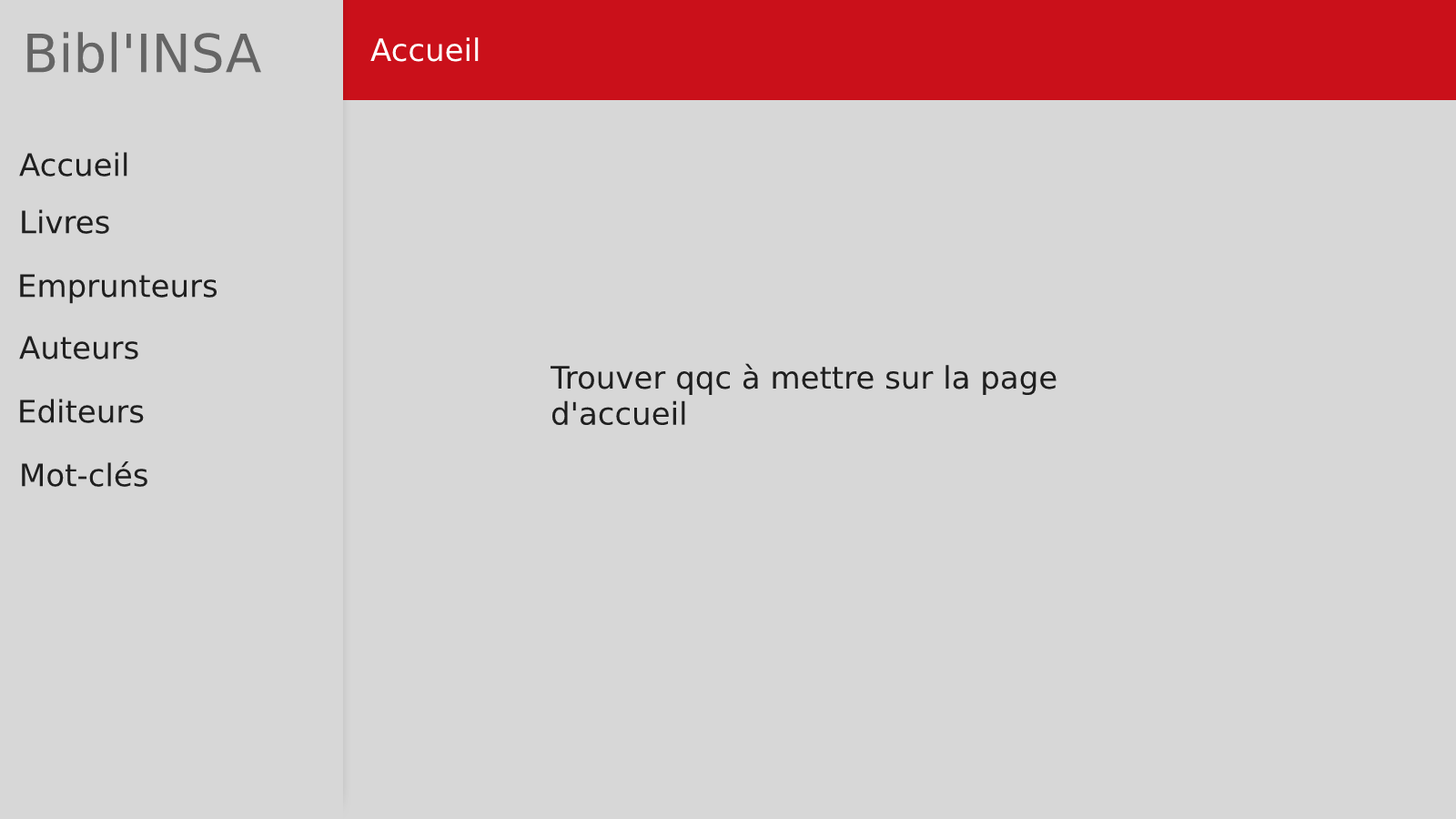
<style>
.page{position:relative;width:1456px;height:819px;background:#d7d7d7}
.page>*{position:absolute;margin:0}
.t1{font:52.8px "DejaVuSans";color:#656565}
.t2{font:30.9px "DejaVuSans";color:#ffffff}
.t3{font:30.9px "DejaVuSans";color:#1f1f1f}
</style>
<div class="page">
<p class="t1" style="left:27px;top:32px;width:234px;height:42px">Bibl'INSA</p>
<p class="t2" style="left:370px;top:37px;width:109px;height:25px">Accueil</p>
<p class="t3" style="left:19px;top:152px;width:108px;height:25px">Accueil</p>
<p class="t3" style="left:22px;top:209px;width:87px;height:25px">Livres</p>
<p class="t3" style="left:20px;top:274px;width:197px;height:30px">Emprunteurs</p>
<p class="t3" style="left:19px;top:336px;width:119px;height:23px">Auteurs</p>
<p class="t3" style="left:550px;top:363px;width:506px;height:63px">Trouver qqc à mettre sur la page d'accueil</p>
<p class="t3" style="left:20px;top:399px;width:124px;height:24px">Editeurs</p>
<p class="t3" style="left:22px;top:461px;width:125px;height:26px">Mot-clés</p>
</div>
